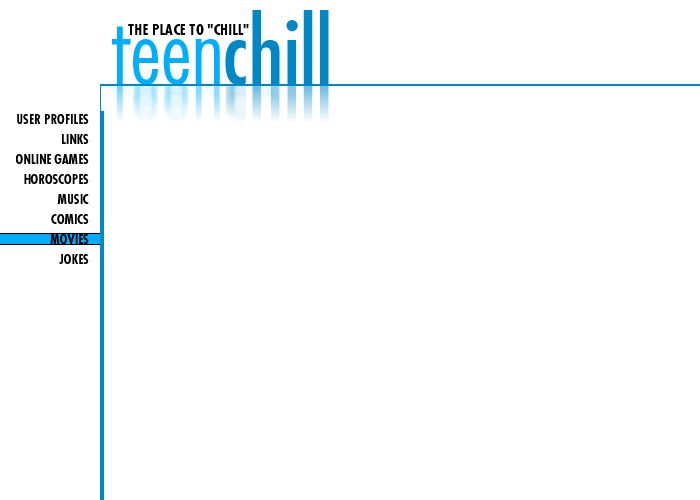
<style>
.page{position:relative;width:700px;height:500px;background:#ffffff}
.page>*{position:absolute;margin:0}
.t1{font:90px "Futura-Condensed";color:#0087c6}
.t2{font:90px "Futura-CondensedLight";color:#00aeff}
.t3{font:15px "Futura-CondensedBold";color:#000000}
.t4{font:13px/20px "Futura-CondensedBold";color:#000000}
</style>
<div class="page">
<p class="t1" style="left:112px;top:10px;width:217px;height:75px"><span class="t2">teen</span>chill</p>
<p class="t3" style="left:128px;top:24px;width:121px;height:11px">THE PLACE TO "CHILL"</p>
<p class="t4" style="left:16px;top:114px;width:73px;height:150px;text-align:right">USER PROFILES<br>LINKS<br>ONLINE GAMES<br>HOROSCOPES<br>MUSIC<br>COMICS<br>MOVIES<br>JOKES</p>
</div>
